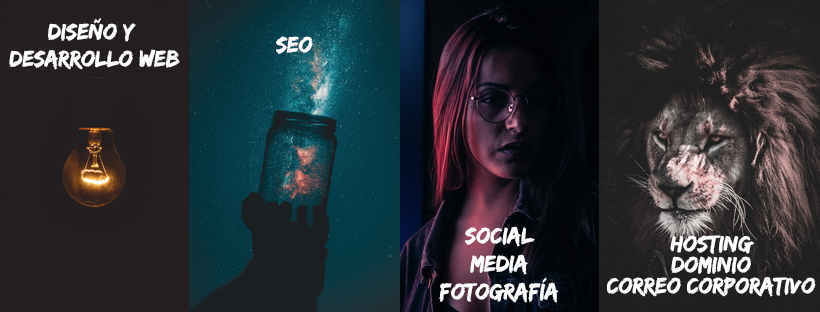
<style>
.page{position:relative;width:820px;height:312px}
.page>*{position:absolute;margin:0}
.t1{font:22.9px "Edo";color:#ffffff}
.t2{font:23.3px "Edo";color:#ffffff}
.t3{font:22.9px/20.8px "Edo";color:#ffffff}
</style>
<div class="page">
<p class="t1" style="left:9px;top:18px;width:171px;height:52px;text-align:center">DISEÑO Y<br> desarrollo web</p>
<p class="t1" style="left:276px;top:36px;width:37px;height:18px">SEO</p>
<p class="t2" style="left:439px;top:226px;width:120px;height:77px;text-align:center">SOCIAL<br>MEDIA<br>FOTOGRAFÍA</p>
<p class="t3" style="left:607px;top:235px;width:209px;height:62px;text-align:center">HOSTING<br>DOMINIO<br>CORREO CORPORATIVO</p>
</div>
